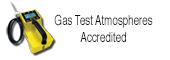
<style>
.page{position:relative;width:170px;height:60px;background:#ffffff}
.page>*{position:absolute;margin:0}
.t1{font:13.9px "Helvetica";color:#131313;scale:0.7 1}
</style>
<div class="page">
<p class="t1" style="left:54px;top:14px;width:99px;height:28px;text-align:center">Gas Test Atmospheres<br>Accredited</p>
</div>
